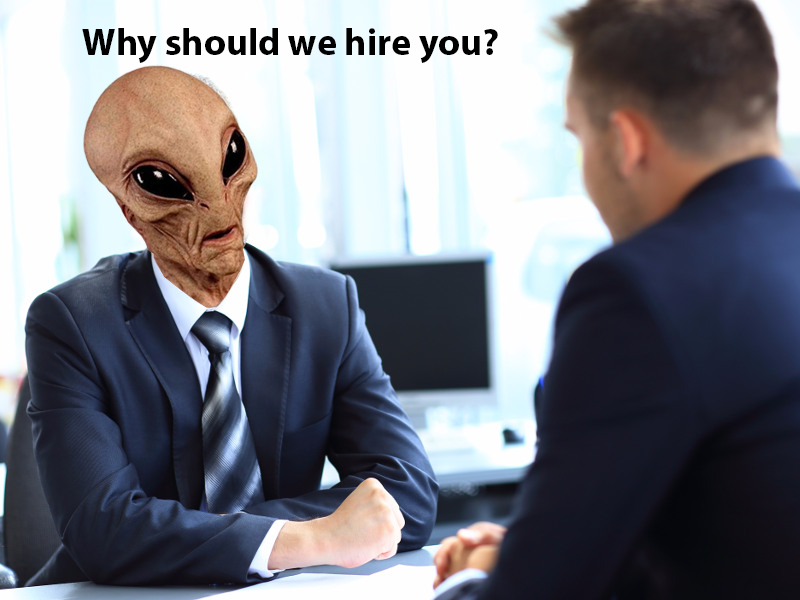
<style>
.page{position:relative;width:800px;height:600px}
.page>*{position:absolute;margin:0}
.t1{font:38px "MyriadPro-Bold";color:#000000}
</style>
<div class="page">
<p class="t1" style="left:82px;top:28px;width:416px;height:35px">Why should we hire you?</p>
</div>
